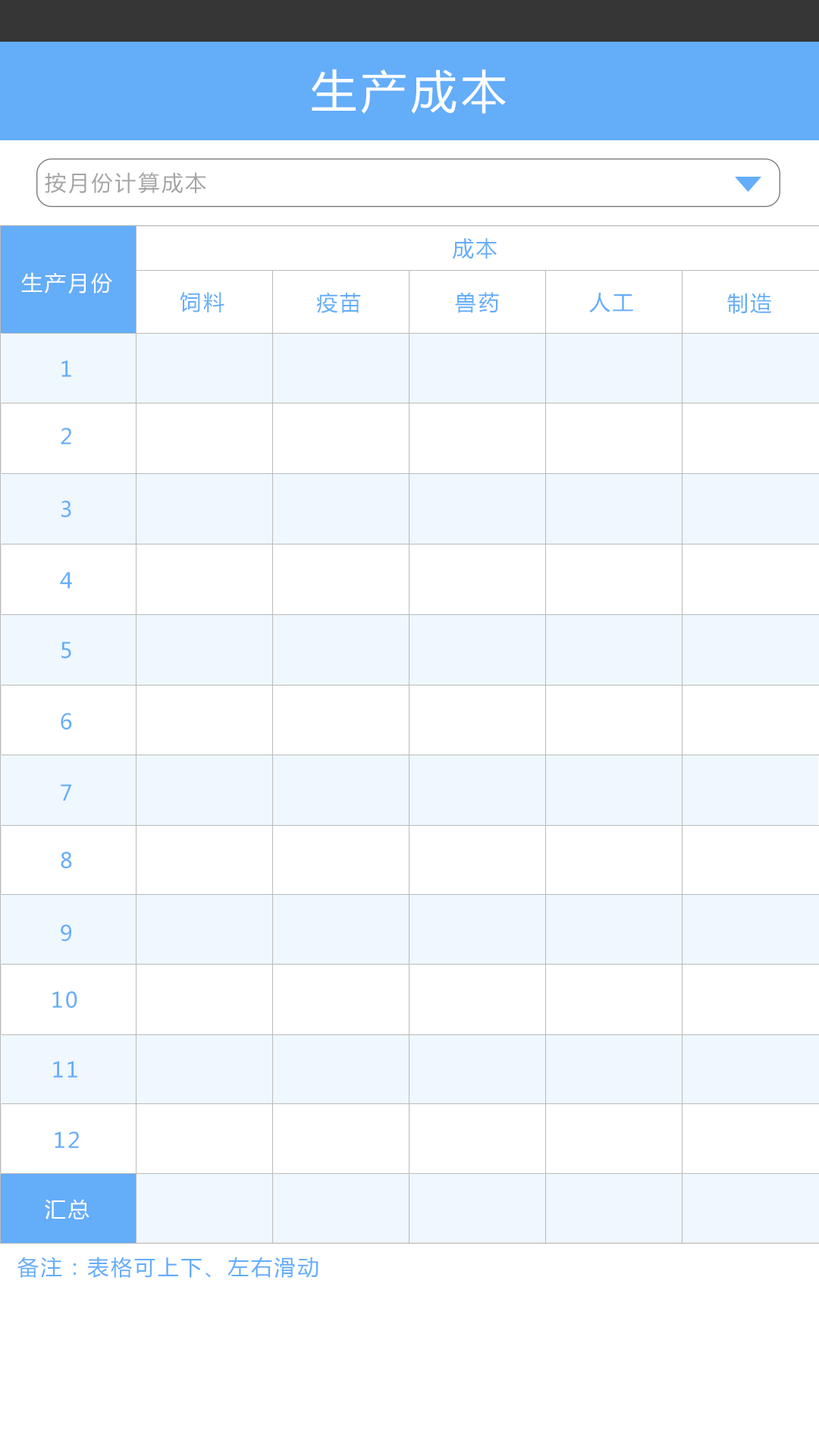
<style>
.page{position:relative;width:819px;height:1456px;background:#ffffff}
.page>*{position:absolute;margin:0}
.t1{font:45.5px "MicrosoftYaHei";letter-spacing:0.1em;color:#ffffff}
.t2{font:21.2px "MicrosoftYaHei";letter-spacing:0.1em;color:#a4a4a4}
.t3{font:21.2px "MicrosoftYaHei";letter-spacing:0.1em;color:#64adf9}
.t4{font:21.2px "MicrosoftYaHei";letter-spacing:0.1em;color:#ffffff}
</style>
<div class="page">
<p class="t1" style="left:312px;top:69px;width:194px;height:45px">生产成本</p>
<p class="t2" style="left:45px;top:172px;width:161px;height:22px">按月份计算成本</p>
<p class="t3" style="left:453px;top:238px;width:44px;height:21px">成本</p>
<p class="t4" style="left:21px;top:272px;width:91px;height:22px">生产月份</p>
<p class="t3" style="left:180px;top:292px;width:44px;height:20px">饲料</p>
<p class="t3" style="left:316px;top:292px;width:45px;height:21px">疫苗</p>
<p class="t3" style="left:455px;top:292px;width:44px;height:21px">兽药</p>
<p class="t3" style="left:589px;top:293px;width:44px;height:19px">人工</p>
<p class="t3" style="left:727px;top:293px;width:44px;height:21px">制造</p>
<p class="t3" style="left:61px;top:360px;width:10px;height:17px">1</p>
<p class="t3" style="left:61px;top:428px;width:10px;height:16px">2</p>
<p class="t3" style="left:61px;top:500px;width:10px;height:17px">3</p>
<p class="t3" style="left:60px;top:572px;width:12px;height:16px">4</p>
<p class="t3" style="left:61px;top:642px;width:10px;height:16px">5</p>
<p class="t3" style="left:61px;top:713px;width:11px;height:17px">6</p>
<p class="t3" style="left:61px;top:784px;width:11px;height:17px">7</p>
<p class="t3" style="left:61px;top:852px;width:11px;height:16px">8</p>
<p class="t3" style="left:61px;top:924px;width:10px;height:17px">9</p>
<p class="t3" style="left:52px;top:991px;width:25px;height:17px">10</p>
<p class="t3" style="left:53px;top:1061px;width:24px;height:17px">11</p>
<p class="t3" style="left:55px;top:1131px;width:24px;height:17px">12</p>
<p class="t4" style="left:45px;top:1199px;width:44px;height:20px">汇总</p>
<p class="t3" style="left:17px;top:1257px;width:301px;height:21px">备注：表格可上下、左右滑动</p>
</div>
